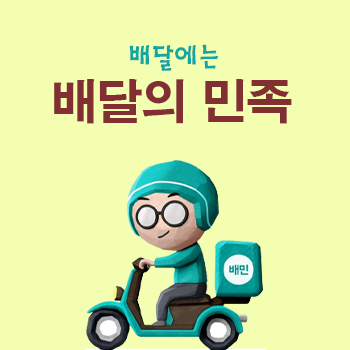
<style>
.page{position:relative;width:350px;height:350px;background:#f3feb0}
.page>*{position:absolute;margin:0}
.t1{font:30px "HaanSaleM";letter-spacing:-0.03em;color:#11a8a3}
.t2{font:46.9px "H2gtrE";letter-spacing:-0.03em;color:#812f33}
</style>
<div class="page">
<p class="t1" style="left:129px;top:44px;width:89px;height:27px">배달에는</p>
<p class="t2" style="left:54px;top:79px;width:238px;height:45px">배달의 민족</p>
</div>
